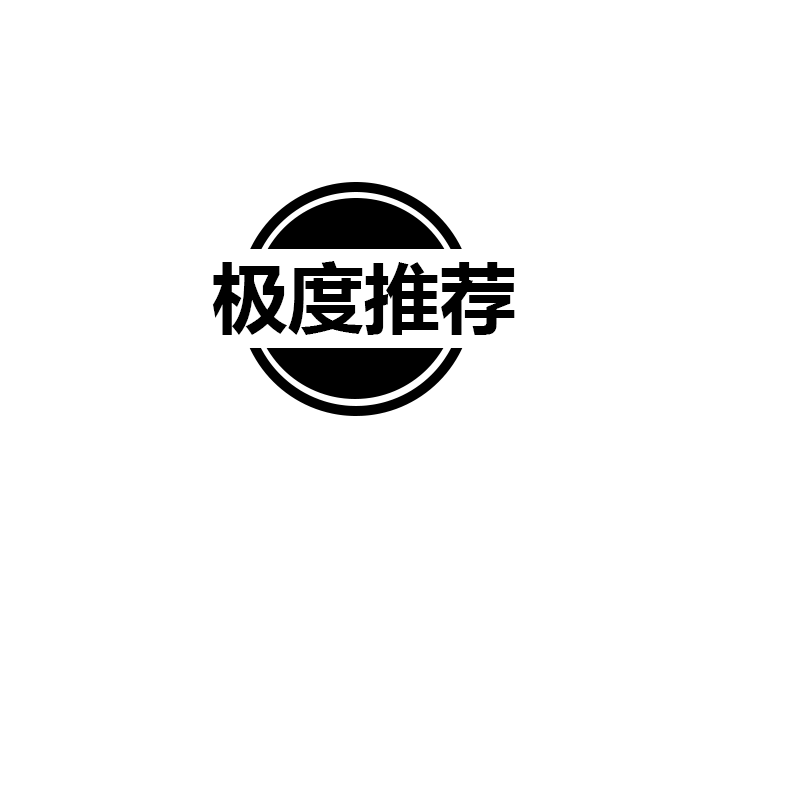
<style>
.page{position:relative;width:800px;height:800px;background:#ffffff}
.page>*{position:absolute;margin:0}
.t1{font:76px "MicrosoftYaHei-Bold";color:#000000}
</style>
<div class="page">
<p class="t1" style="left:212px;top:261px;width:303px;height:74px">极度推荐</p>
</div>
